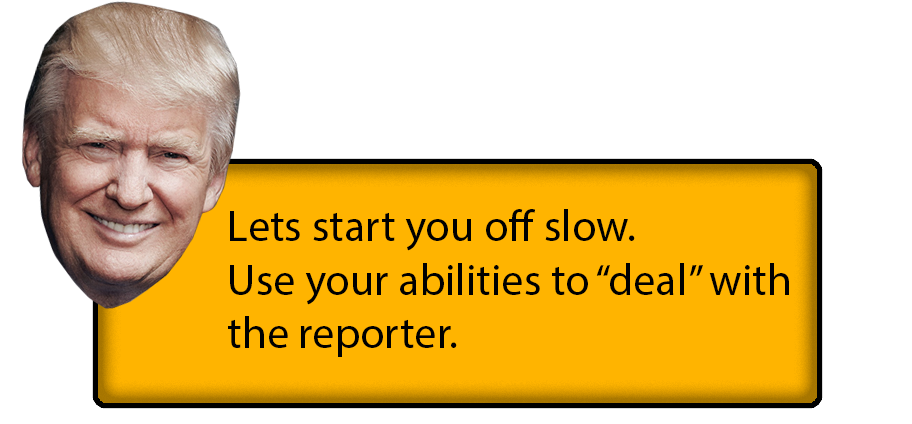
<style>
.page{position:relative;width:912px;height:424px;background:#ffffff}
.page>*{position:absolute;margin:0}
.t1{font:44.4px "MyriadPro-Regular";color:#000000}
</style>
<div class="page">
<p class="t1" style="left:228px;top:209px;width:561px;height:148px">Lets start you off slow.<br>Use your abilities to “deal” with<br>the reporter.</p>
</div>
